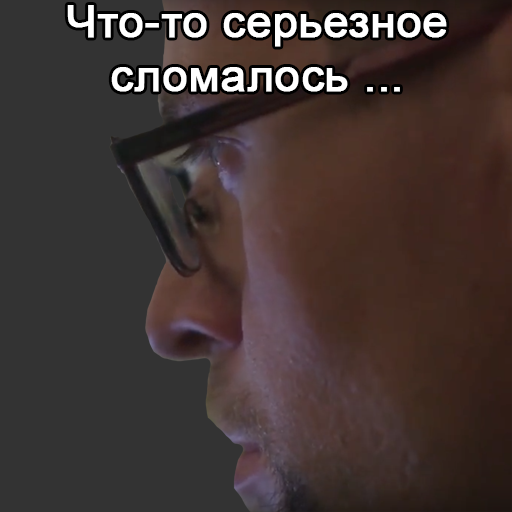
<style>
.page{position:relative;width:512px;height:512px;background:#333333}
.page>*{position:absolute;margin:0}
.t1{font:45px "ArialMT";color:#ffffff;font-weight:bold}
</style>
<div class="page">
<p class="t1" style="left:67px;top:5px;width:380px;height:87px;text-align:center">Что-то серьезное<br>сломалось ...</p>
</div>
